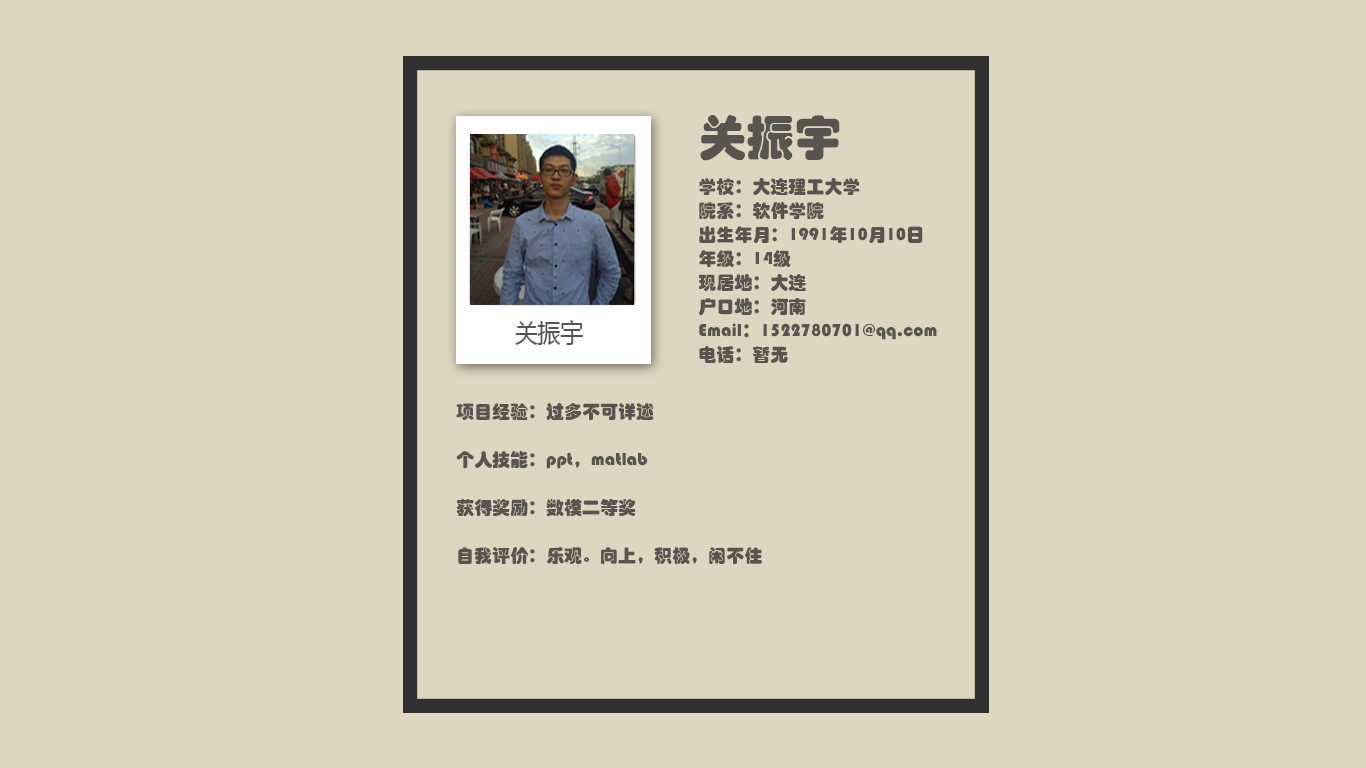
<style>
.page{position:relative;width:1366px;height:768px;background:#ded6c0}
.page>*{position:absolute;margin:0}
.t1{font:18px/24px "STHupo";color:#585450}
.t2{font:48px/40px "STHupo";color:#585450}
.t3{font:25.7px "MicrosoftYaHei";color:#585450;scale:0.88 1}
</style>
<div class="page">
<p class="t1" style="left:698px;top:115px;width:239px;height:248px"><span class="t2">关振宇<br></span><br>学校：大连理工大学<br>院系：软件学院<br>出生年月：1991年10月10日<br>年级：14级<br>现居地：大连<br>户口地：河南<br>Email：1522780701@qq.com<br>电话：暂无</p>
<p class="t3" style="left:515px;top:320px;width:68px;height:25px">关振宇</p>
<p class="t1" style="left:456px;top:403px;width:306px;height:162px">项目经验：过多不可详述<br><br>个人技能：ppt，matlab<br><br>获得奖励：数模二等奖<br><br>自我评价：乐观。向上，积极，闲不住</p>
</div>
